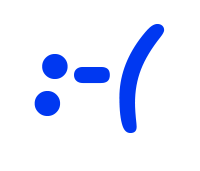
<style>
.page{position:relative;width:200px;height:171px;background:#ffffff}
.page>*{position:absolute;margin:0}
.t1{font:187.2px "HarlowSolid";color:#0038f1}
.t2{font:124.8px "HarlowSolid";color:#0038f1}
</style>
<div class="page">
<p class="t1" style="left:34px;top:24px;width:131px;height:109px">:-<span class="t2">(</span></p>
</div>
